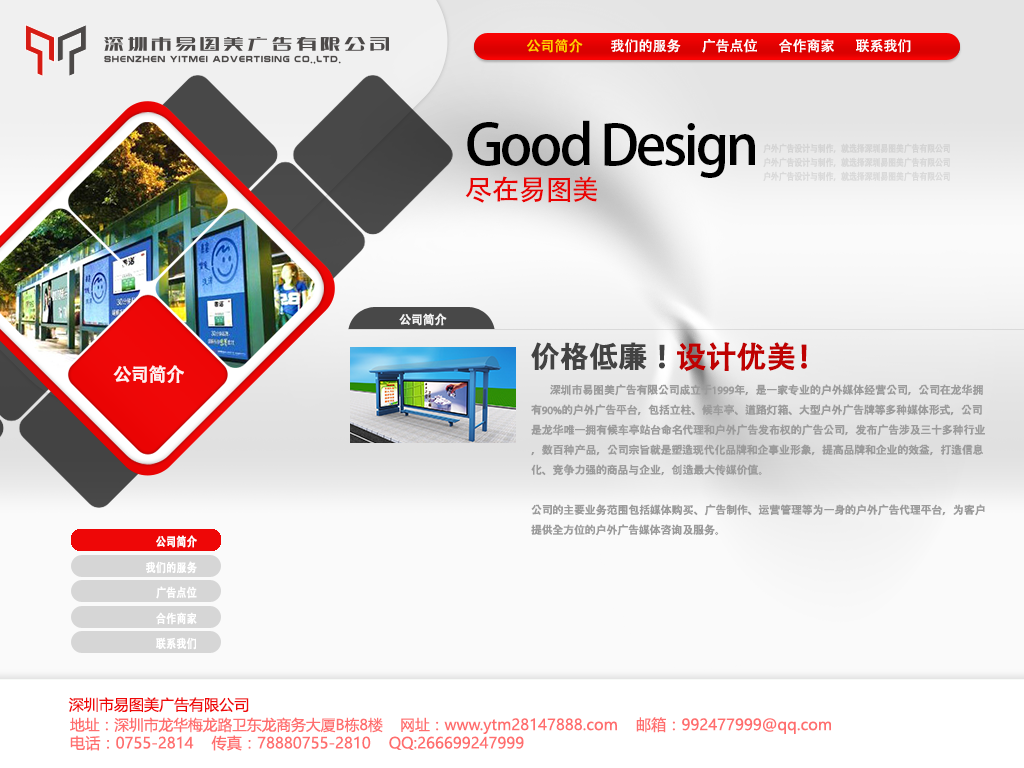
<style>
.page{position:relative;width:1024px;height:768px}
.page>*{position:absolute;margin:0}
.t1{font:14px "AdobeHeitiStd-Regular";color:#ffffff}
.t2{font:14px "AdobeHeitiStd-Regular";color:#ffd200}
.t3{font:55px/30px "AdobeHeitiStd-Regular";letter-spacing:-0.05em;color:#000000}
.t4{font:28px/30px "AdobeHeitiStd-Regular";letter-spacing:-0.05em;color:#e90303}
.t5{font:9.6px/14px "AdobeHeitiStd-Regular";letter-spacing:-0.05em;color:#d7d7d7;font-weight:bold;scale:0.83 1}
.t6{font:12px "AdobeHeitiStd-Regular";letter-spacing:-0.05em;color:#ffffff;font-weight:bold}
.t7{font:30px "YDIYGO110";letter-spacing:-0.025em;color:#424242;font-weight:bold}
.t8{font:30px "AdobeHeitiStd-Regular";letter-spacing:-0.025em;color:#bf0101;font-weight:bold}
.t9{font:18px "AdobeHeitiStd-Regular";letter-spacing:-0.05em;color:#ffffff;font-weight:bold}
.t10{font:11px/20px "YDIYGO330";letter-spacing:-0.025em;color:#9b9b9b;font-weight:bold}
.t11{font:11px/20px "MyriadPro-Regular";letter-spacing:-0.025em;color:#9b9b9b;font-weight:bold}
.t12{font:11px/20px "AdobeHeitiStd-Regular";letter-spacing:-0.025em;color:#9b9b9b;font-weight:bold}
.t13{font:12px "AdobeHeitiStd-Regular";color:#ffffff;font-weight:bold;scale:0.83 1}
.t14{font:15px "MicrosoftYaHei";color:#ef0808}
.t15{font:15.3px "MicrosoftYaHei";color:#ff5757}
.t16{font:14.8px "MicrosoftYaHei";color:#ff5757}
</style>
<div class="page">
<p class="t1" style="left:527px;top:39px;width:384px;height:14px"><span class="t2">公司简介        </span>我们的服务      广告点位      合作商家      联系我们</p>
<p class="t3" style="left:465px;top:120px;width:290px;height:83px">Good Design<br><span class="t4">尽在易图美</span></p>
<p class="t5" style="left:763px;top:143px;width:187px;height:39px">户外广告设计与制作，就选择深圳易图美广告有限公司<br>户外广告设计与制作，就选择深圳易图美广告有限公司<br>户外广告设计与制作，就选择深圳易图美广告有限公司</p>
<p class="t6" style="left:399px;top:313px;width:48px;height:13px;opacity:0.91">公司简介</p>
<p class="t7" style="left:531px;top:342px;width:276px;height:30px">价格低廉！<span class="t8">设计优美！</span></p>
<p class="t9" style="left:113px;top:365px;width:71px;height:18px;opacity:0.91">公司简介</p>
<p class="t10" style="left:531px;top:384px;width:454px;height:152px"><span class="t11">        </span>深<span class="t12">圳</span>市易<span class="t12">图</span>美<span class="t12">广</span>告有限公司成立于<span class="t11">1999</span>年，是一家<span class="t12">专业</span>的<span class="t12">户</span>外媒<span class="t12">体经营</span>公司，公司在<span class="t12">龙华拥<br></span>有<span class="t11">90%</span>的<span class="t12">户</span>外<span class="t12">广</span>告平台，包括立柱、候<span class="t12">车</span>亭、道路<span class="t12">灯</span>箱、大型<span class="t12">户</span>外<span class="t12">广</span>告牌等多<span class="t12">种</span>媒<span class="t12">体</span>形式，公司<br>是<span class="t12">龙华</span>唯一<span class="t12">拥</span>有候<span class="t12">车</span>亭站台命名代理和<span class="t12">户</span>外<span class="t12">广</span>告<span class="t12">发</span>布<span class="t12">权</span>的<span class="t12">广</span>告公司，<span class="t12">发</span>布<span class="t12">广</span>告涉及三十多<span class="t12">种</span>行<span class="t12">业<br></span>，<span class="t12">数</span>百<span class="t12">种产</span>品，公司宗旨就是塑造<span class="t12">现</span>代化品牌和企事<span class="t12">业</span>形象，提高品牌和企<span class="t12">业</span>的效益，打造信息<br>化、<span class="t12">竞争</span>力强的商品<span class="t12">与</span>企<span class="t12">业</span>，<span class="t12">创</span>造最大<span class="t12">传</span>媒价<span class="t12">值</span>。<br><br>公司的主要<span class="t12">业务</span>范<span class="t12">围</span>包括媒<span class="t12">体购买</span>、<span class="t12">广</span>告制作、<span class="t12">运营</span>管理等<span class="t12">为</span>一身的<span class="t12">户</span>外<span class="t12">广</span>告代理平台，<span class="t12">为</span>客<span class="t12">户<br></span>提供全方位的<span class="t12">户</span>外<span class="t12">广</span>告媒<span class="t12">体</span>咨<span class="t12">询</span>及服<span class="t12">务</span>。</p>
<p class="t13" style="left:156px;top:535px;width:41px;height:13px">公司简介</p>
<p class="t13" style="left:146px;top:561px;width:51px;height:13px">我们的服务</p>
<p class="t13" style="left:156px;top:586px;width:41px;height:13px">广告点位</p>
<p class="t13" style="left:156px;top:612px;width:41px;height:13px">合作商家</p>
<p class="t13" style="left:156px;top:637px;width:40px;height:13px">联系我们</p>
<p class="t14" style="left:68px;top:697px;width:181px;height:16px">深圳市易图美广告有限公司</p>
<p class="t15" style="left:70px;top:717px;width:761px;height:34px;opacity:0.9"><span class="t16">地址：深圳市龙华梅龙路卫东龙商务大厦B栋8楼    网址：</span>www.ytm28147888.com    邮箱：992477999@qq.com<br>电话：0755-2814    传真：78880755-2810    QQ:266699247999</p>
</div>
